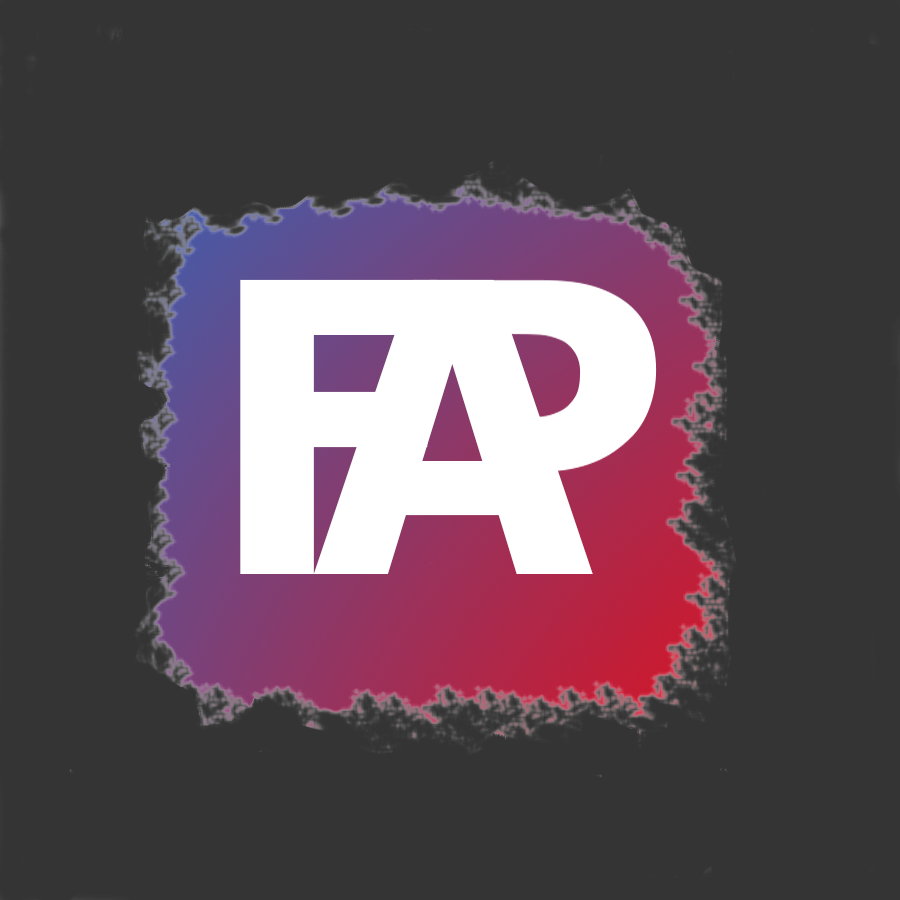
<style>
.page{position:relative;width:900px;height:900px;background:#343434}
.page>*{position:absolute;margin:0}
.t1{font:403.9px "Tahoma-Bold";color:#ffffff}
.t2{font:404.2px "Tahoma-Bold";color:#ffffff}
</style>
<div class="page">
<p class="t1" style="left:240px;top:279px;width:198px;height:295px">F</p>
<p class="t2" style="left:313px;top:279px;width:280px;height:295px">A</p>
</div>
